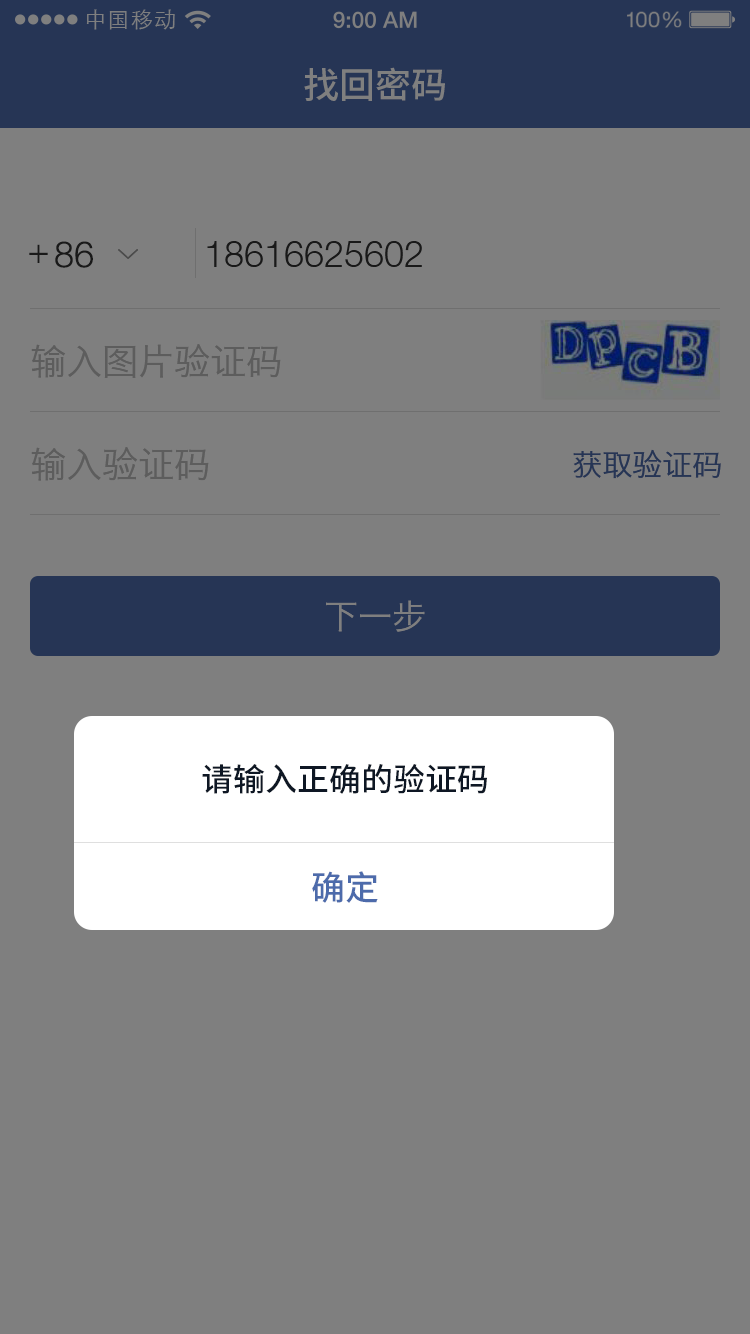
<style>
.page{position:relative;width:750px;height:1334px;background:#7f7f7f}
.page>*{position:absolute;margin:0}
.t1{font:21.9px "STXihei";letter-spacing:0.04em;color:#7f7f7f}
.t2{font:36px "NotoSansHans-Medium";color:#7f7f7f}
.t3{font:36px "HelveticaNeueLTStd-Lt";color:#191919}
.t4{font:36px "HiraginoSansGB-W3";color:#5d5d5d}
.t5{font:30px "HiraginoSansGB-W3";color:#263555}
.t6{font:34px "HiraginoSansGB-W3";color:#7f7f7f}
.t7{font:32px "NotoSansHans-Medium";color:#0e1724}
.t8{font:34px "NotoSansHans-Medium";color:#4d6bab}
</style>
<div class="page">
<p class="t1" style="left:86px;top:9px;width:89px;height:21px">中国移动</p>
<p class="t2" style="left:304px;top:67px;width:141px;height:34px">找回密码</p>
<p class="t3" style="left:29px;top:244px;width:19px;height:19px">+</p>
<p class="t3" style="left:55px;top:241px;width:38px;height:27px">86</p>
<p class="t3" style="left:207px;top:241px;width:215px;height:26px">18616625602</p>
<p class="t4" style="left:31px;top:344px;width:250px;height:34px">输入图片验证码</p>
<p class="t4" style="left:31px;top:447px;width:178px;height:34px">输入验证码</p>
<p class="t5" style="left:573px;top:449px;width:148px;height:30px">获取验证码</p>
<p class="t6" style="left:326px;top:600px;width:99px;height:32px">下一步</p>
<p class="t7" style="left:202px;top:764px;width:285px;height:30px">请输入正确的验证码</p>
<p class="t8" style="left:312px;top:871px;width:66px;height:32px">确定</p>
</div>
